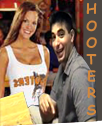
<style>
.page{position:relative;width:102px;height:126px}
.page>*{position:absolute;margin:0}
.t1{font:14px "ComicSansMS-Bold";color:#d3873c}
</style>
<div class="page">
<p class="t1" style="left:86px;top:3px;width:11px;height:113px;text-align:center">H<br>O<br>O<br>T<br>E<br>R<br>S</p>
</div>
